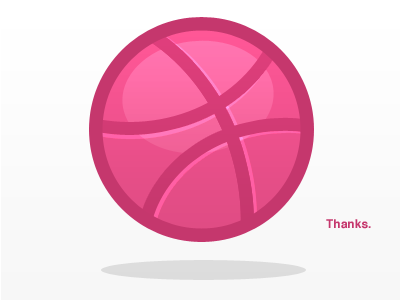
<style>
.page{position:relative;width:400px;height:300px}
.page>*{position:absolute;margin:0}
.t1{font:12px "Helvetica-Bold";color:#c5376d}
</style>
<div class="page">
<p class="t1" style="left:326px;top:219px;width:45px;height:10px">Thanks.</p>
</div>
